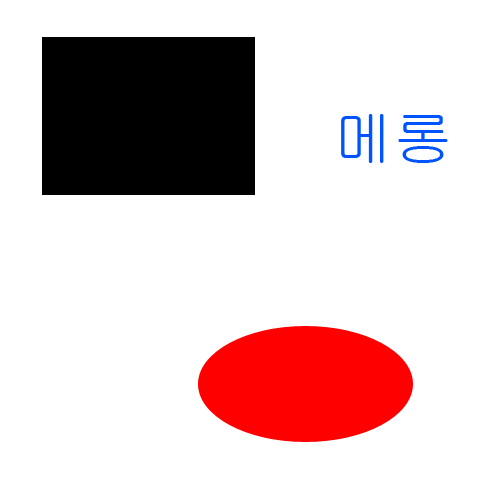
<style>
.page{position:relative;width:500px;height:500px;background:#ffffff}
.page>*{position:absolute;margin:0}
.t1{font:60px "Gulim";color:#0054ff}
</style>
<div class="page">
<p class="t1" style="left:341px;top:114px;width:107px;height:49px">메롱</p>
</div>
